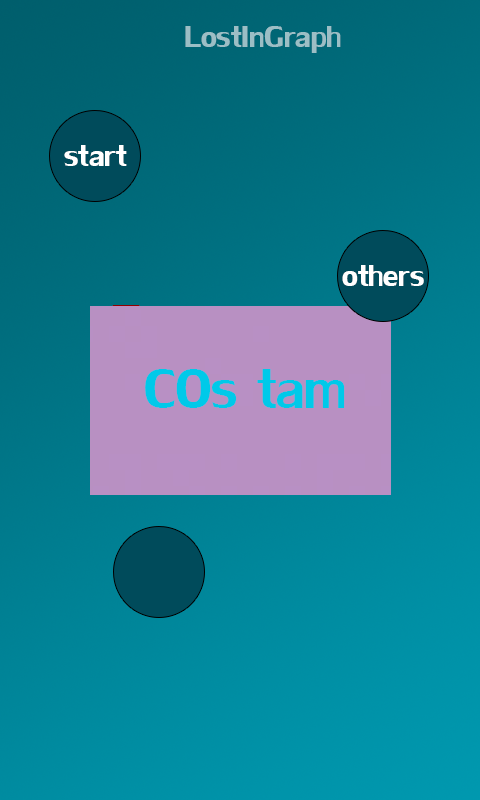
<style>
.page{position:relative;width:480px;height:800px}
.page>*{position:absolute;margin:0}
.t1{font:46px "LilyUPC";color:#9cbec5}
.t2{font:46px "LilyUPC";color:#ffffff}
.t3{font:84px "LilyUPC";color:#00c9e9}
</style>
<div class="page">
<p class="t1" style="left:185px;top:26px;width:156px;height:27px">LostInGraph</p>
<p class="t2" style="left:64px;top:145px;width:63px;height:21px">start</p>
<p class="t2" style="left:342px;top:265px;width:82px;height:21px">others</p>
<p class="t3" style="left:145px;top:369px;width:200px;height:39px">COs tam</p>
</div>
